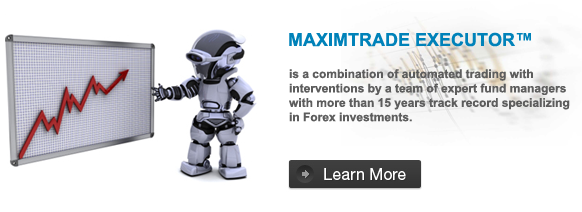
<style>
.page{position:relative;width:582px;height:212px;background:#ffffff}
.page>*{position:absolute;margin:0}
.t1{font:18px "Arial-BoldMT";color:#0082b9}
.t2{font:12px "Arial-BoldMT";color:#5d5d5d}
</style>
<div class="page">
<p class="t1" style="left:289px;top:32px;width:242px;height:15px">MAXIMTRADE EXECUTOR™</p>
<p class="t2" style="left:289px;top:69px;width:281px;height:53px">is a combination of automated trading with <br>interventions by a team of expert fund managers <br>with more than 15 years track record specializing <br>in Forex investments.</p>
</div>
